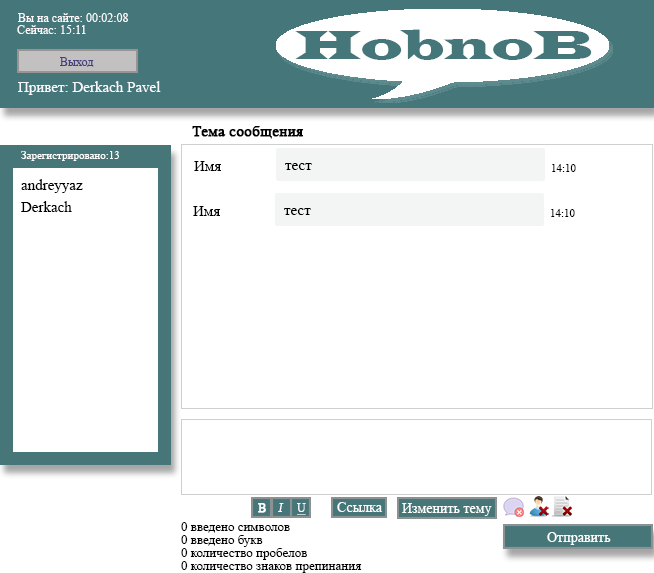
<style>
.page{position:relative;width:654px;height:573px;background:#ffffff}
.page>*{position:absolute;margin:0}
.t1{font:12px "TimesNewRomanPSMT";color:#fbf9f9}
.t2{font:12px "TimesNewRomanPSMT";color:#453f7c}
.t3{font:15px "TimesNewRomanPSMT";color:#f8f8fc}
.t4{font:15px "TimesNewRomanPSMT";color:#000000;font-weight:bold}
.t5{font:11px "TimesNewRomanPSMT";color:#ffffff}
.t6{font:15px "TimesNewRomanPSMT";color:#000000}
.t7{font:11px "TimesNewRomanPSMT";color:#000000}
.t8{font:12px "TimesNewRomanPSMT";color:#ffffff;font-weight:bold}
.t9{font:12px "TimesNewRomanPSMT";color:#ffffff;font-style:italic}
.t10{font:12px "TimesNewRomanPSMT";color:#ffffff;text-decoration:underline}
.t11{font:14px "TimesNewRomanPSMT";color:#ffffff}
.t12{font:13px "TimesNewRomanPSMT";color:#000000}
</style>
<div class="page">
<p class="t1" style="left:18px;top:13px;width:110px;height:9px">Вы на сайте: 00:02:08</p>
<p class="t1" style="left:17px;top:25px;width:69px;height:9px">Сейчас: 15:11</p>
<p class="t2" style="left:60px;top:57px;width:34px;height:10px">Выход</p>
<p class="t3" style="left:18px;top:81px;width:143px;height:14px">Привет: Derkach Pavel</p>
<p class="t4" style="left:192px;top:126px;width:111px;height:13px">Тема сообщения</p>
<p class="t5" style="left:21px;top:151px;width:98px;height:10px">Зарегистрировано:13</p>
<p class="t6" style="left:194px;top:161px;width:27px;height:10px">Имя</p>
<p class="t6" style="left:285px;top:163px;width:27px;height:7px">тест</p>
<p class="t7" style="left:552px;top:164px;width:24px;height:8px">14:10</p>
<p class="t6" style="left:21px;top:179px;width:62px;height:14px">andreyyaz</p>
<p class="t6" style="left:21px;top:201px;width:51px;height:11px">Derkach</p>
<p class="t6" style="left:193px;top:206px;width:27px;height:10px">Имя</p>
<p class="t6" style="left:284px;top:208px;width:27px;height:7px">тест</p>
<p class="t7" style="left:551px;top:209px;width:24px;height:8px">14:10</p>
<p class="t8" style="left:258px;top:503px;width:8px;height:10px">B</p>
<p class="t9" style="left:278px;top:503px;width:6px;height:9px">I</p>
<p class="t10" style="left:297px;top:503px;width:9px;height:12px">U</p>
<p class="t11" style="left:337px;top:502px;width:46px;height:10px">Ссылка</p>
<p class="t11" style="left:402px;top:503px;width:90px;height:13px">Изменить тему</p>
<p class="t12" style="left:181px;top:522px;width:109px;height:11px">0 введено символов</p>
<p class="t11" style="left:547px;top:532px;width:64px;height:13px">Отправить</p>
<p class="t12" style="left:181px;top:535px;width:82px;height:12px">0 введено букв</p>
<p class="t12" style="left:181px;top:548px;width:126px;height:12px">0 количество пробелов</p>
<p class="t12" style="left:181px;top:561px;width:181px;height:12px">0 количество знаков препинания</p>
</div>
